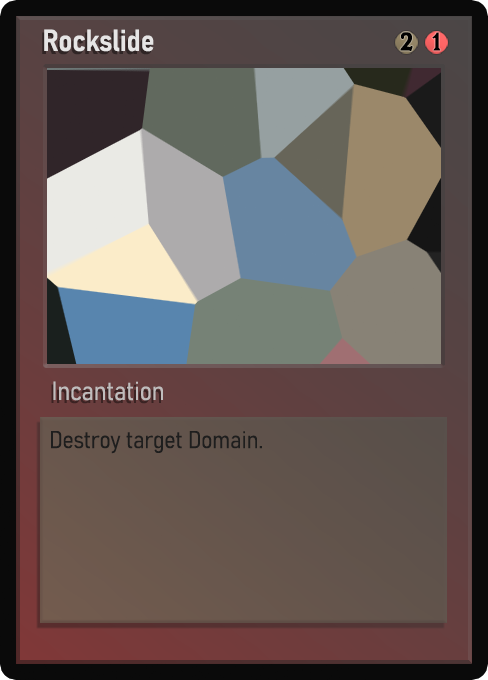
<style>
.page{position:relative;width:488px;height:680px}
.page>*{position:absolute;margin:0}
.t1{font:30px "Bahnschrift-SemiBoldSemiCondensed";color:#f2f2f2;font-weight:bold}
.t2{font:25px "WTRRoycroft";color:#000000;font-weight:bold;scale:1.09 1}
.t3{font:26px "Bahnschrift-LightSemiCondensed";color:#c8c8c8;font-weight:bold}
.t4{font:24px "Bahnschrift-LightSemiCondensed";color:#1e1e1e;font-weight:bold}
</style>
<div class="page">
<p class="t1" style="left:44px;top:29px;width:110px;height:23px;opacity:0.9">Rockslide</p>
<p class="t2" style="left:400px;top:32px;width:13px;height:19px">2</p>
<p class="t2" style="left:432px;top:32px;width:9px;height:19px">1</p>
<p class="t3" style="left:53px;top:381px;width:110px;height:20px;opacity:0.9">Incantation</p>
<p class="t4" style="left:51px;top:431px;width:211px;height:23px">Destroy target Domain.</p>
</div>
